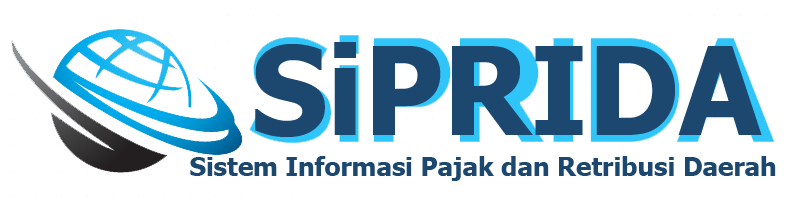
<style>
.page{position:relative;width:797px;height:201px;background:#ffffff}
.page>*{position:absolute;margin:0}
.t1{font:122.2px "Tahoma-Bold";color:#1c4870}
.t2{font:25.9px "Tahoma-Bold";color:#1c4870}
</style>
<div class="page">
<p class="t1" style="left:255px;top:42px;width:507px;height:95px">SiPRIDA</p>
<p class="t2" style="left:190px;top:156px;width:586px;height:25px">Sistem Informasi Pajak dan Retribusi Daerah</p>
</div>
